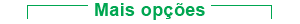
<style>
.page{position:relative;width:300px;height:24px;background:#ffffff}
.page>*{position:absolute;margin:0}
.t1{font:18px "Arial-BoldMT";letter-spacing:0.02em;color:#00a651}
</style>
<div class="page">
<p class="t1" style="left:95px;top:3px;width:110px;height:17px">Mais opções</p>
</div>
